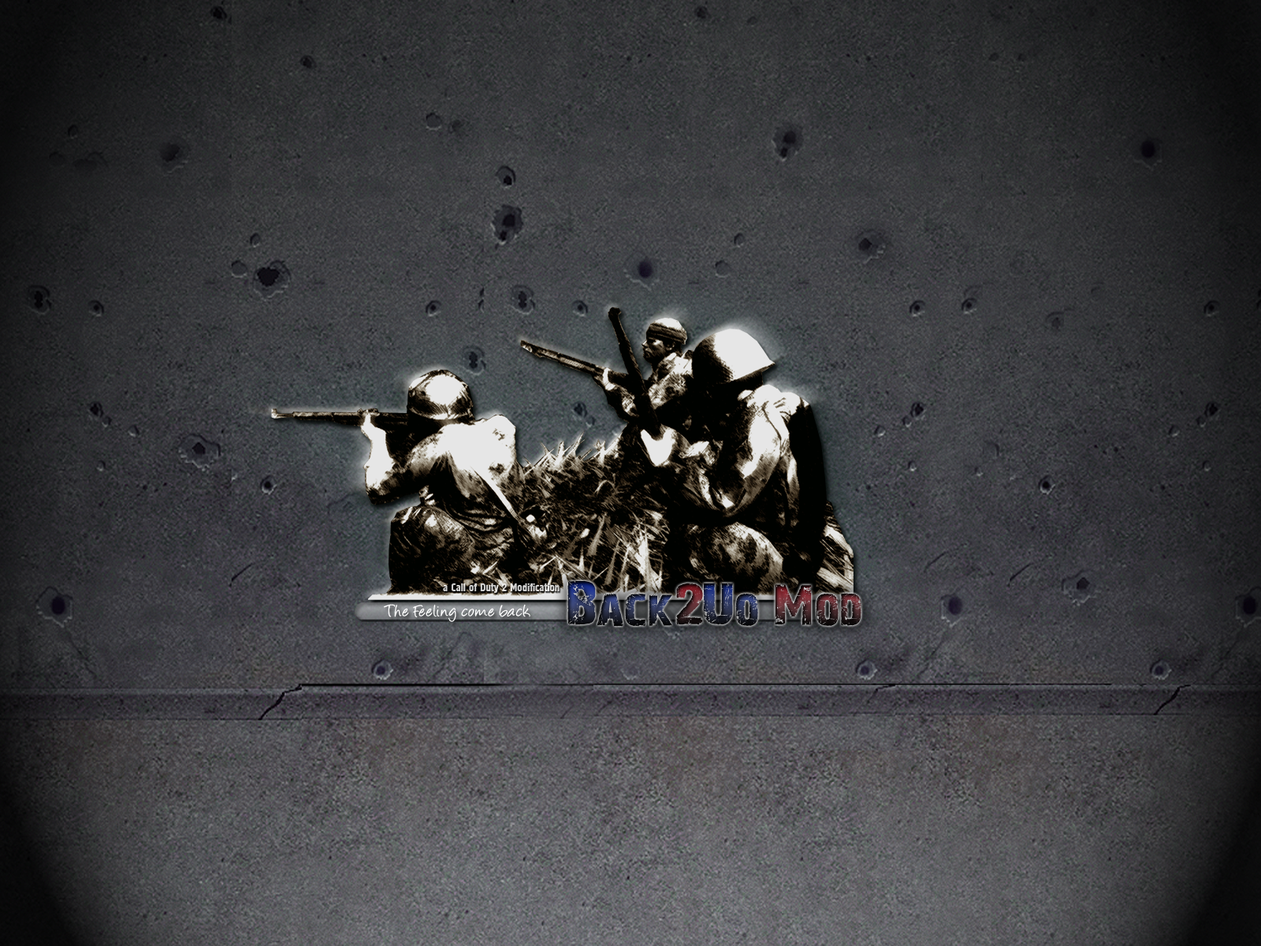
<style>
.page{position:relative;width:1261px;height:946px}
.page>*{position:absolute;margin:0}
.t1{font:47.3px "28-Days-Later-Regular";scale:1.07 1}
.t2{font:56.7px "28-Days-Later-Regular";scale:1.07 1}
.t3{font:11px "ft57-Normal";color:#cecdcd}
.t4{font:18.9px "Angelina";color:#ffffff;scale:1.07 1}
</style>
<div class="page">
<p class="t1" style="left:567px;top:581px;width:294px;height:46px"><span class="t2">B</span>ack<span class="t2">2</span><span class="t2">U</span>o <span class="t2">M</span>od</p>
<p class="t3" style="left:443px;top:582px;width:117px;height:11px">a Call of Duty 2 Modification</p>
<p class="t4" style="left:384px;top:604px;width:146px;height:18px">The Feeling come back</p>
</div>
